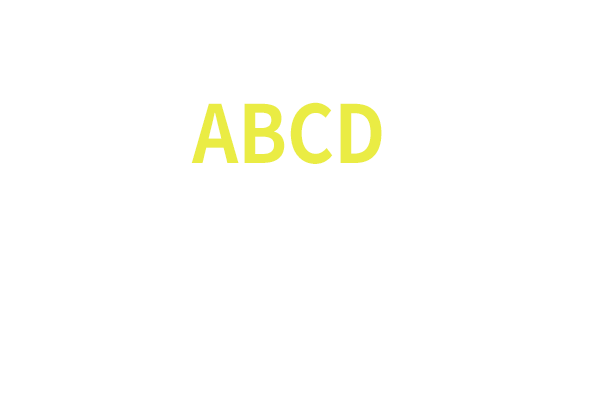
<style>
.page{position:relative;width:600px;height:400px;background:#ffffff}
.page>*{position:absolute;margin:0}
.t1{font:80px "NotoSansKR-Bold";color:#eaec44;scale:0.9 1}
</style>
<div class="page">
<p class="t1" style="left:191px;top:102px;width:191px;height:62px">ABCD</p>
</div>
